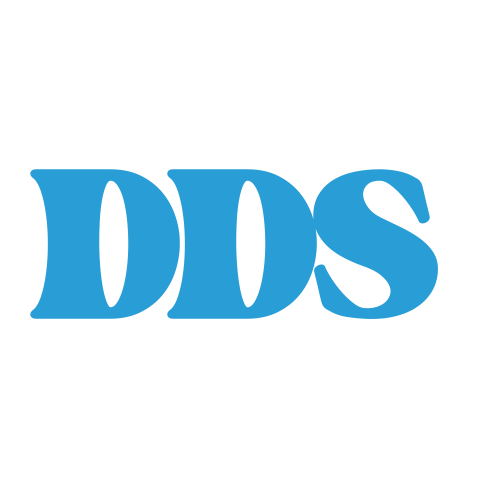
<style>
.page{position:relative;width:500px;height:500px;background:#ffffff}
.page>*{position:absolute;margin:0}
.t1{font:200px "Vorlesta-Regular";letter-spacing:-0.05em;color:#299ed6;font-weight:bold}
</style>
<div class="page">
<p class="t1" style="left:30px;top:169px;width:408px;height:150px">DDS</p>
</div>
